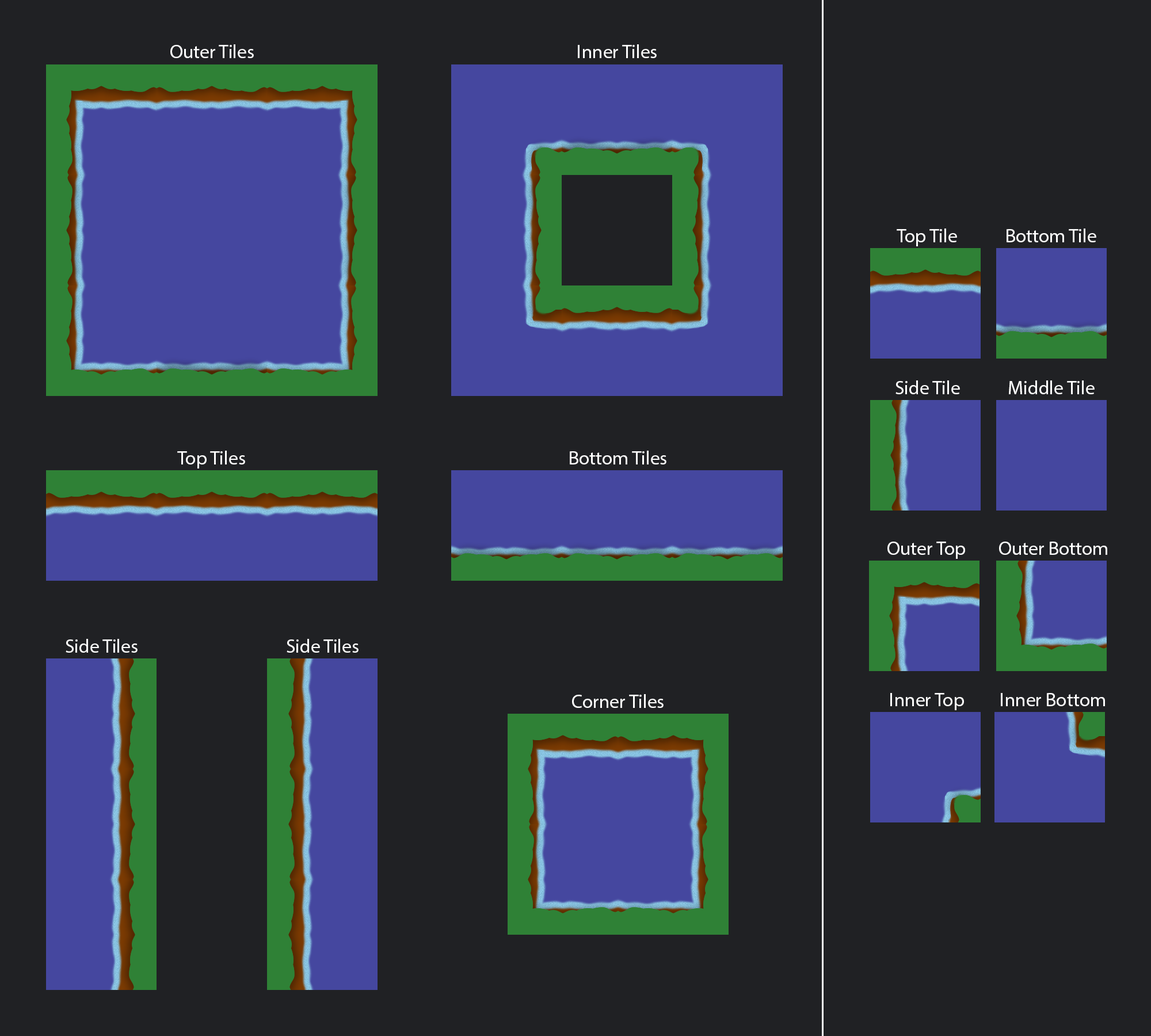
<style>
.page{position:relative;width:1151px;height:1036px;background:#202124}
.page>*{position:absolute;margin:0}
.t1{font:19.2px "MyriadPro-Regular";color:#ffffff}
</style>
<div class="page">
<p class="t1" style="left:170px;top:44px;width:84px;height:14px">Outer Tiles</p>
<p class="t1" style="left:578px;top:44px;width:79px;height:14px">Inner Tiles</p>
<p class="t1" style="left:897px;top:228px;width:60px;height:18px">Top Tile</p>
<p class="t1" style="left:1007px;top:228px;width:89px;height:14px">Bottom Tile</p>
<p class="t1" style="left:896px;top:380px;width:64px;height:14px">Side Tile</p>
<p class="t1" style="left:1009px;top:380px;width:86px;height:14px">Middle Tile</p>
<p class="t1" style="left:177px;top:451px;width:68px;height:17px">Top Tiles</p>
<p class="t1" style="left:570px;top:451px;width:96px;height:13px">Bottom Tiles</p>
<p class="t1" style="left:887px;top:542px;width:78px;height:17px">Outer Top</p>
<p class="t1" style="left:999px;top:542px;width:108px;height:13px">Outer Bottom</p>
<p class="t1" style="left:66px;top:639px;width:72px;height:14px">Side Tiles</p>
<p class="t1" style="left:287px;top:639px;width:72px;height:14px">Side Tiles</p>
<p class="t1" style="left:572px;top:694px;width:92px;height:14px">Corner Tiles</p>
<p class="t1" style="left:890px;top:693px;width:74px;height:17px">Inner Top</p>
<p class="t1" style="left:1001px;top:693px;width:104px;height:13px">Inner Bottom</p>
</div>
